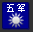
<style>
.page{position:relative;width:33px;height:32px;background:#000090}
.page>*{position:absolute;margin:0}
.t1{font:10.4px "SimSun";color:#ffffff}
</style>
<div class="page">
<p class="t1" style="left:7px;top:4px;width:18px;height:8px">五军</p>
</div>
